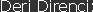
<style>
.page{position:relative;width:93px;height:12px;background:#333333}
.page>*{position:absolute;margin:0}
.t1{font:16px "Verdana";letter-spacing:-0.03em;color:#ffffff}
</style>
<div class="page">
<p class="t1" style="left:1px;top:0px;width:92px;height:12px">Deri Direnci:</p>
</div>
